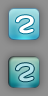
<style>
.page{position:relative;width:48px;height:96px}
.page>*{position:absolute;margin:0}
.t1{font:24px "DFMaruMoji-W9-WING-RKSJ-H";color:#ffffff;font-weight:bold}
.t2{font:24px "DFMaruMoji-W9-WING-RKSJ-H";color:#b5e3e9;font-weight:bold}
</style>
<div class="page">
<p class="t1" style="left:16px;top:15px;width:18px;height:19px">2</p>
<p class="t2" style="left:16px;top:63px;width:18px;height:19px">2</p>
</div>
